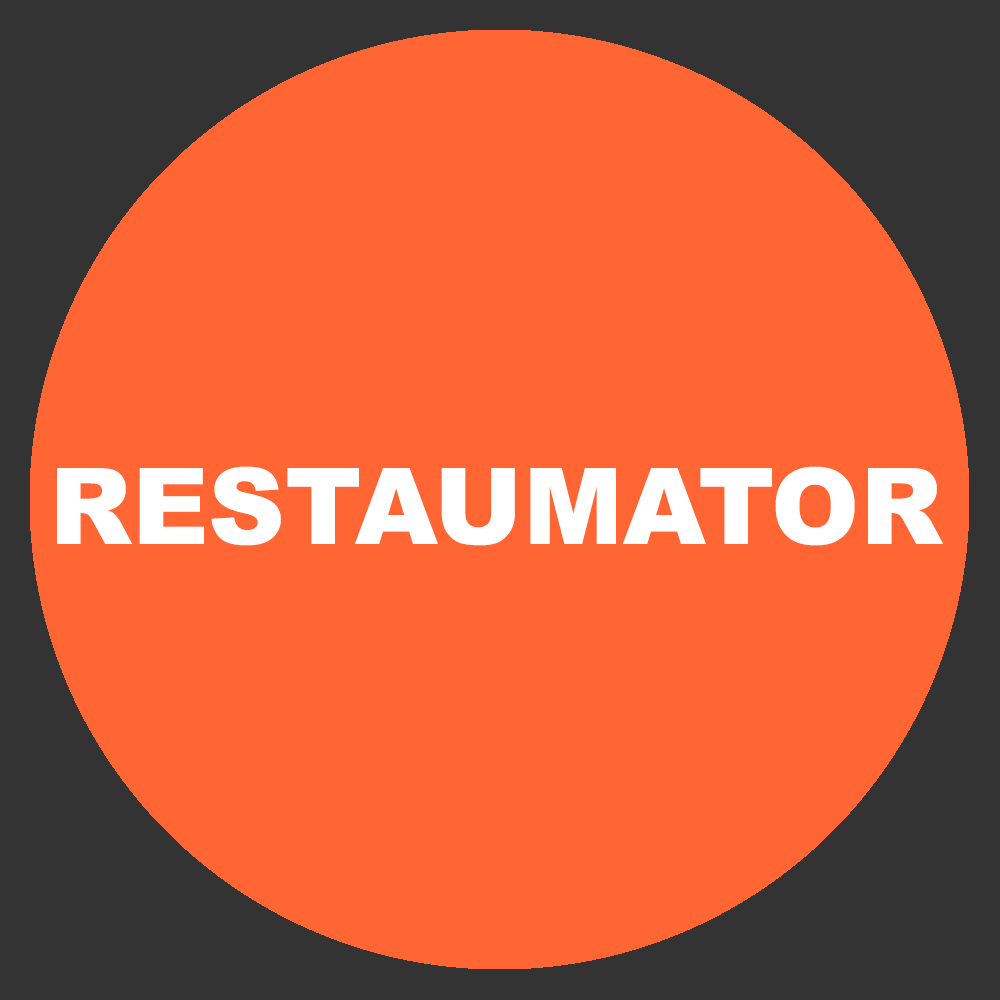
<style>
.page{position:relative;width:1000px;height:1000px;background:#ff6633}
.page>*{position:absolute;margin:0}
.t1{font:106.3px "Arial-Black";color:#ffffff}
</style>
<div class="page">
<p class="t1" style="left:57px;top:466px;width:886px;height:80px">RESTAUMATOR</p>
</div>
